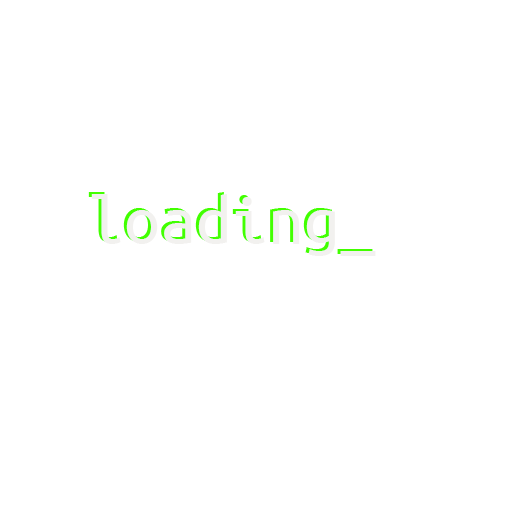
<style>
.page{position:relative;width:512px;height:512px;background:#ffffff}
.page>*{position:absolute;margin:0}
.t1{font:72px "UbuntuMono-Regular"}
.t2{font:72px "UbuntuMono-Regular";color:#f2f1ef}
</style>
<div class="page">
<p class="t1" style="left:88px;top:192px;width:285px;height:62px">loading_</p>
<p class="t2" style="left:91px;top:194px;width:285px;height:62px">loading_</p>
</div>
